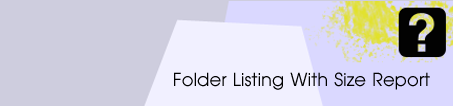
<style>
.page{position:relative;width:453px;height:106px;background:#cecdde}
.page>*{position:absolute;margin:0}
.t1{font:18px "Avian";color:#000000}
</style>
<div class="page">
<p class="t1" style="left:174px;top:72px;width:256px;height:18px">Folder Listing With Size Report</p>
</div>
